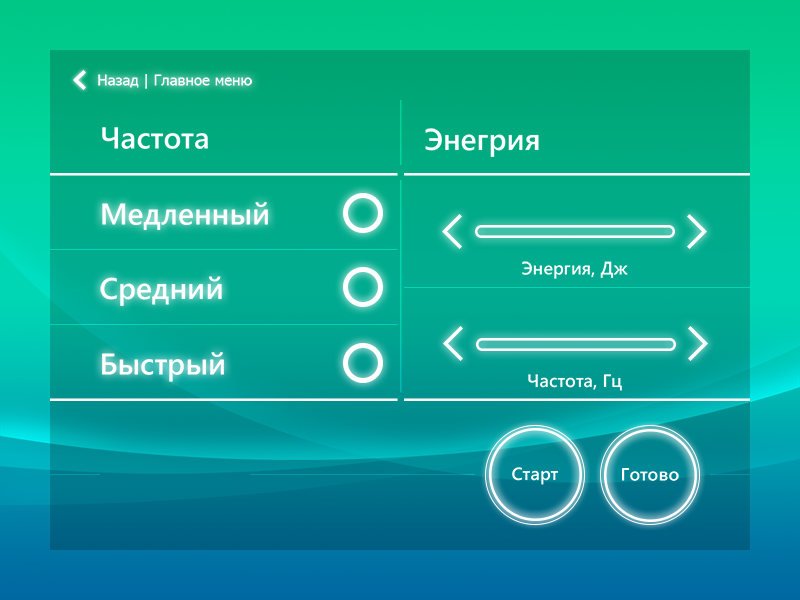
<style>
.page{position:relative;width:800px;height:600px}
.page>*{position:absolute;margin:0}
.t1{font:14.8px "Tahoma";color:#ffffff}
.t2{font:30px "MicrosoftMHei-Bold";color:#ffffff}
.t3{font:18px "MicrosoftMHei-Bold";color:#ffffff}
.t4{font:17.8px "MicrosoftMHei-Bold";color:#ffffff}
</style>
<div class="page">
<p class="t1" style="left:98px;top:74px;width:154px;height:15px">Назад | Главное меню</p>
<p class="t2" style="left:102px;top:127px;width:106px;height:22px">Частота</p>
<p class="t2" style="left:425px;top:128px;width:114px;height:29px">Энегрия</p>
<p class="t2" style="left:102px;top:202px;width:166px;height:28px">Медленный</p>
<p class="t3" style="left:522px;top:261px;width:106px;height:18px">Энергия, Дж</p>
<p class="t2" style="left:100px;top:276px;width:122px;height:30px">Средний</p>
<p class="t2" style="left:102px;top:352px;width:122px;height:30px">Быстрый</p>
<p class="t3" style="left:528px;top:374px;width:94px;height:17px">Частота, Гц</p>
<p class="t4" style="left:512px;top:467px;width:46px;height:18px">Старт</p>
<p class="t4" style="left:622px;top:468px;width:57px;height:13px">Готово</p>
</div>
